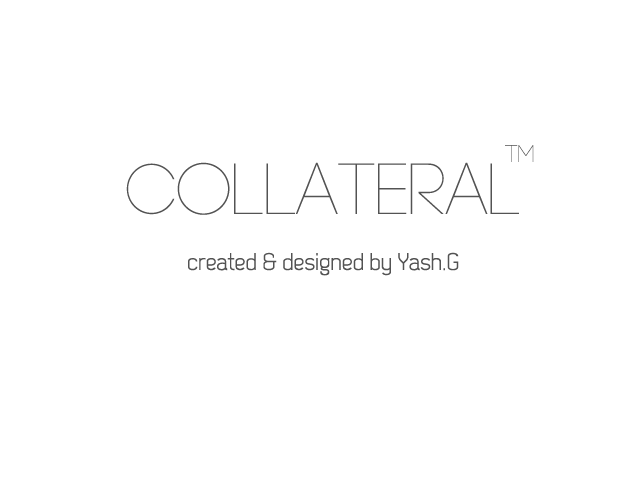
<style>
.page{position:relative;width:640px;height:480px;background:#ffffff}
.page>*{position:absolute;margin:0}
.t1{font:24px "Code-Light";letter-spacing:-0.005em}
.t2{font:24px "Dekar";letter-spacing:-0.005em;color:#535353}
</style>
<div class="page">
<p class="t1" style="left:505px;top:145px;width:29px;height:17px">tm</p>
<p class="t2" style="left:188px;top:252px;width:271px;height:24px">created &amp; designed by Yash.G</p>
</div>
